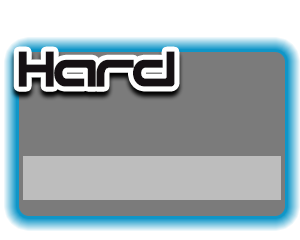
<style>
.page{position:relative;width:300px;height:240px;background:#7b7b7b}
.page>*{position:absolute;margin:0}
.t1{font:60px "NicoKaku";letter-spacing:-0.1em;color:#151013}
</style>
<div class="page">
<p class="t1" style="left:18px;top:51px;width:157px;height:36px">Hard</p>
</div>
